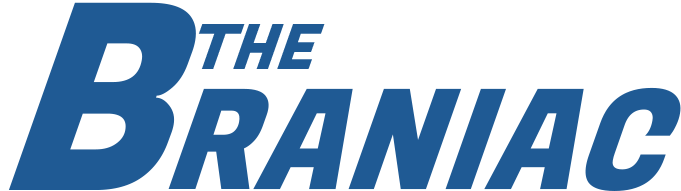
<style>
.page{position:relative;width:681px;height:191px;background:#ffffff}
.page>*{position:absolute;margin:0}
.t1{font:259.7px "FugazOne-Regular";color:#1f5a94;font-style:italic}
.t2{font:62.5px "FugazOne-Regular";color:#1f5a94;font-style:italic}
.t3{font:138.9px "FugazOne-Regular";color:#1f5a94;font-style:italic}
</style>
<div class="page">
<p class="t1" style="left:8px;top:2px;width:188px;height:188px">B</p>
<p class="t2" style="left:198px;top:24px;width:127px;height:45px">THE</p>
<p class="t3" style="left:168px;top:87px;width:513px;height:104px">RANIAC</p>
</div>
